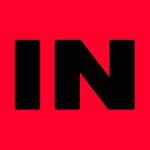
<style>
.page{position:relative;width:150px;height:150px;background:#ff022c}
.page>*{position:absolute;margin:0}
.t1{font:96px "MADEOuterSans-Bold";letter-spacing:0.05em;color:#020202;font-weight:bold}
</style>
<div class="page">
<p class="t1" style="left:14px;top:39px;width:121px;height:71px">IN</p>
</div>
